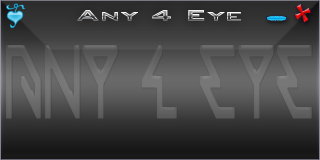
<style>
.page{position:relative;width:320px;height:160px}
.page>*{position:absolute;margin:0}
.t1{font:19px "BankGothicBT-Medium";font-weight:bold;scale:1.5 1}
.t2{font:95.9px "x1ao4linebold";color:#666666;font-weight:bold;scale:0.47 1}
</style>
<div class="page">
<p class="t1" style="left:77px;top:10px;width:164px;height:11px">Any 4 Eye</p>
<p class="t2" style="left:6px;top:44px;width:307px;height:76px">Any 4 Eye</p>
</div>
